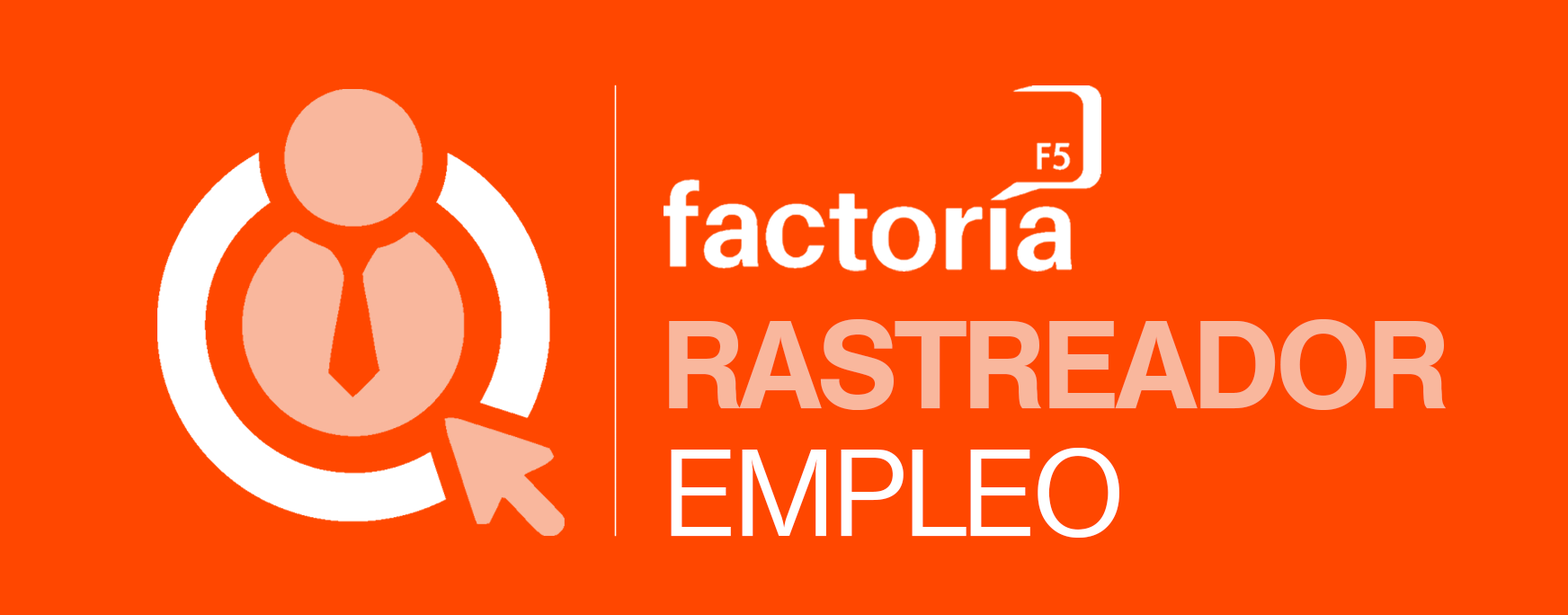
<style>
.page{position:relative;width:1568px;height:615px;background:#ff4700}
.page>*{position:absolute;margin:0}
.t1{font:120.6px/127.4px "BasicSansSF-Bold";color:#f9b79d}
.t2{font:120.6px/127.4px "BasicSansSF";color:#ffffff}
</style>
<div class="page">
<p class="t1" style="left:669px;top:319px;width:777px;height:219px">RASTREADOR<br><span class="t2">EMPLEO</span></p>
</div>
